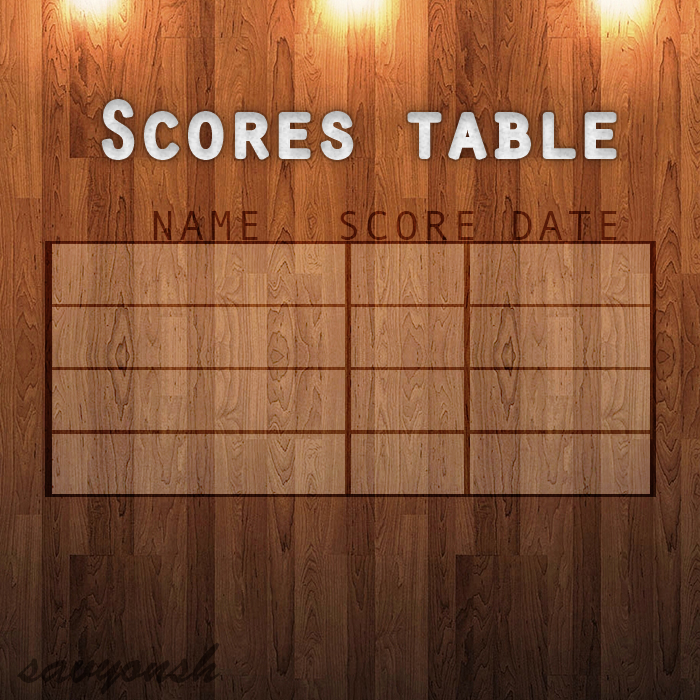
<style>
.page{position:relative;width:700px;height:700px}
.page>*{position:absolute;margin:0}
.t1{font:41.7px "AndaleMono";letter-spacing:0.1em;color:#521706}
.t2{font:41.7px "AndaleMono";letter-spacing:0.1em;color:#511606}
.t3{font:41.7px "AndaleMono";letter-spacing:0.1em;color:#551806}
.t4{font:58.4px "BrushScriptStd";color:#190e08}
</style>
<div class="page">
<p class="t1" style="left:153px;top:211px;width:105px;height:29px">NAME</p>
<p class="t2" style="left:340px;top:211px;width:134px;height:29px">SCORE</p>
<p class="t3" style="left:513px;top:211px;width:104px;height:29px">DATE</p>
<p class="t4" style="left:17px;top:643px;width:203px;height:52px">savyonsh</p>
</div>
